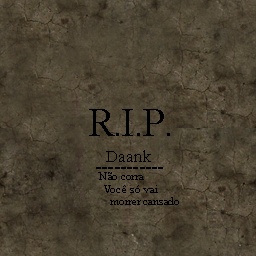
<style>
.page{position:relative;width:256px;height:256px}
.page>*{position:absolute;margin:0}
.t1{font:10.7px "TimesNewRomanPSMT";letter-spacing:-0.02em;color:#000000;scale:1.08 1}
.t2{font:10.7px "TimesNewRomanPSMT";letter-spacing:0.009em;color:#000000;scale:1.08 1}
</style>
<div class="page">
<p class="t1" style="left:98px;top:172px;width:46px;height:8px">Não corra</p>
<p class="t2" style="left:104px;top:185px;width:54px;height:8px">Você só vai</p>
<p class="t1" style="left:110px;top:197px;width:69px;height:8px">morrer cansado</p>
</div>
